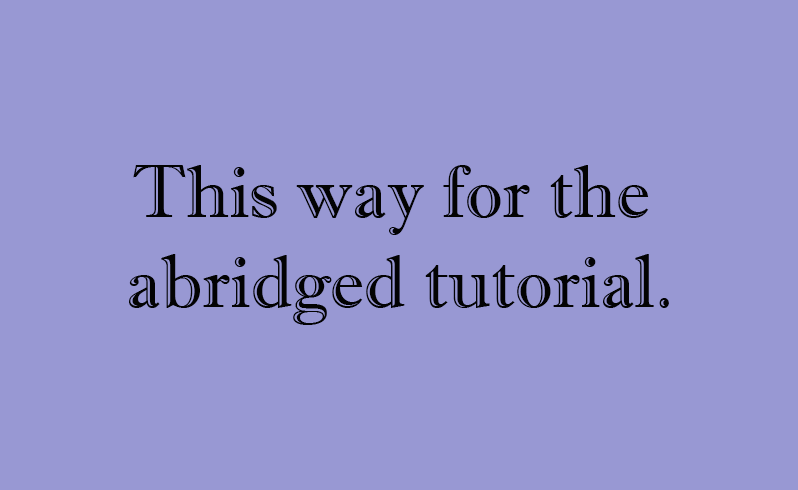
<style>
.page{position:relative;width:798px;height:490px;background:#9898d3}
.page>*{position:absolute;margin:0}
.t1{font:74.8px "ImprintMT-Shadow";color:#030303}
</style>
<div class="page">
<p class="t1" style="left:129px;top:165px;width:540px;height:160px;text-align:center">This way for the <br>abridged tutorial.</p>
</div>
